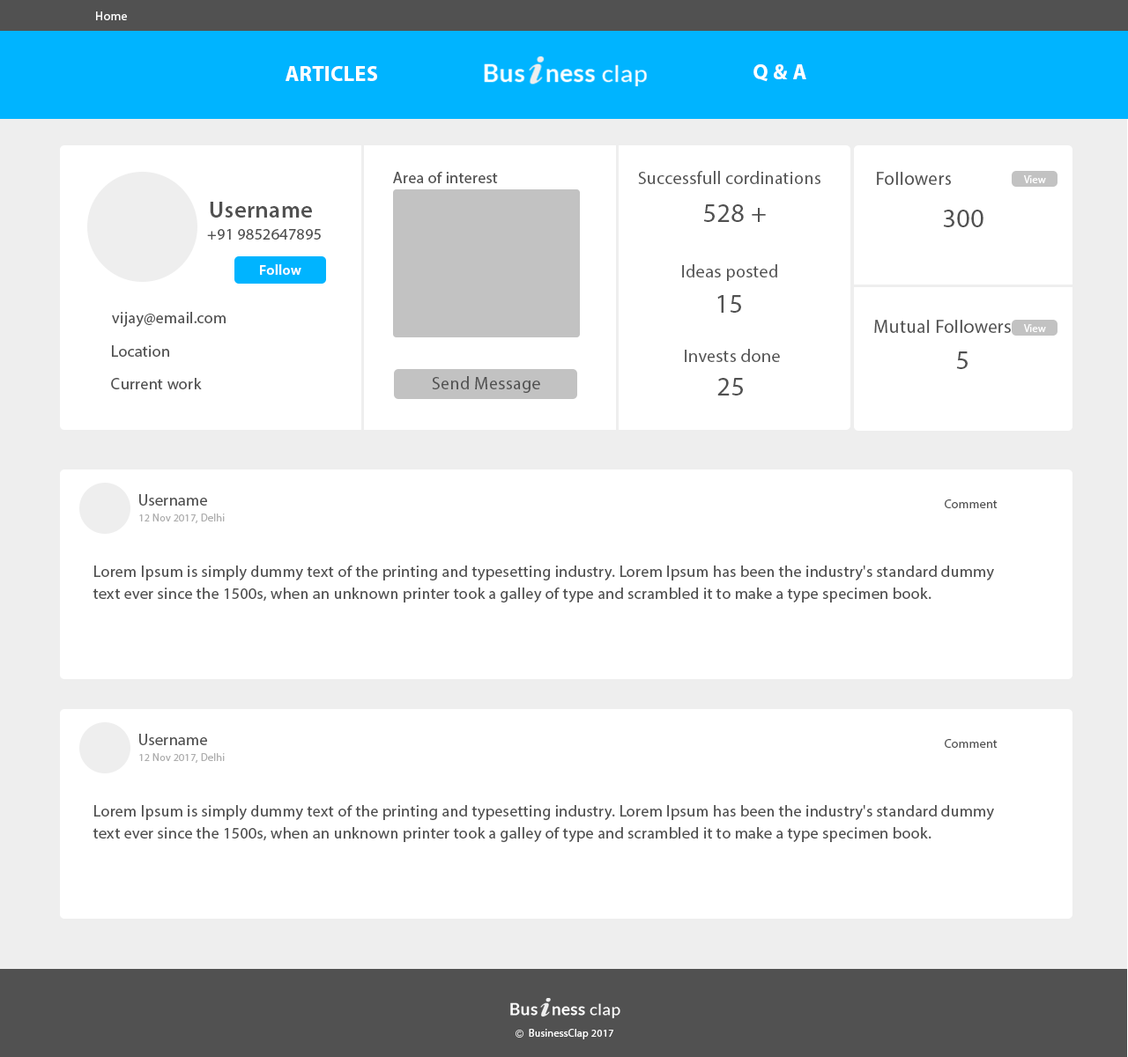
<style>
.page{position:relative;width:1128px;height:1057px;background:#ffffff}
.page>*{position:absolute;margin:0}
.t1{font:12.3px "MyriadPro-Regular";letter-spacing:0.02em;color:#ffffff}
.t2{font:21.1px "MyriadPro-Bold";letter-spacing:0.02em;color:#ffffff}
.t3{font:15.9px "MyriadPro-Regular";letter-spacing:0.02em;color:#515151}
.t4{font:17.6px "MyriadPro-Regular";letter-spacing:0.02em;color:#515151}
.t5{font:18.5px "MyriadPro-Regular";letter-spacing:0.02em;color:#515151}
.t6{font:10.6px "MyriadPro-Regular";letter-spacing:0.02em;color:#ffffff}
.t7{font:22.9px "MyriadPro-Semibold";letter-spacing:0.02em;color:#515151}
.t8{font:26.4px "MyriadPro-Regular";letter-spacing:0.02em;color:#515151}
.t9{font:14.1px "MyriadPro-Semibold";letter-spacing:0.02em;color:#ffffff}
.t10{font:12.3px "MyriadPro-Regular";letter-spacing:0.02em;color:#515151}
.t11{font:10.6px "MyriadPro-Regular";letter-spacing:0.02em;color:#aeaeae}
.t12{font:15.9px/21.9px "MyriadPro-Regular";letter-spacing:0.02em;color:#515151}
</style>
<div class="page">
<p class="t1" style="left:96px;top:11px;width:31px;height:9px">Home</p>
<p class="t2" style="left:753px;top:64px;width:53px;height:18px">Q &amp; A</p>
<p class="t2" style="left:285px;top:66px;width:92px;height:15px">ARTICLES</p>
<p class="t3" style="left:393px;top:172px;width:105px;height:11px">Area of interest</p>
<p class="t4" style="left:638px;top:171px;width:182px;height:13px">Successfull cordinations</p>
<p class="t5" style="left:877px;top:172px;width:74px;height:13px">Followers</p>
<p class="t6" style="left:1024px;top:175px;width:22px;height:8px">View</p>
<p class="t7" style="left:210px;top:202px;width:102px;height:16px">Username</p>
<p class="t8" style="left:703px;top:204px;width:63px;height:18px">528 +</p>
<p class="t8" style="left:943px;top:210px;width:40px;height:17px">300</p>
<p class="t3" style="left:207px;top:229px;width:114px;height:11px">+91 9852647895</p>
<p class="t9" style="left:260px;top:264px;width:41px;height:11px">Follow</p>
<p class="t4" style="left:682px;top:264px;width:95px;height:17px">Ideas posted</p>
<p class="t8" style="left:717px;top:295px;width:24px;height:18px">15</p>
<p class="t3" style="left:112px;top:312px;width:114px;height:15px">vijay@email.com</p>
<p class="t5" style="left:874px;top:320px;width:137px;height:13px">Mutual Followers</p>
<p class="t6" style="left:1024px;top:324px;width:22px;height:8px">View</p>
<p class="t3" style="left:112px;top:345px;width:57px;height:12px">Location</p>
<p class="t4" style="left:685px;top:349px;width:95px;height:13px">Invests done</p>
<p class="t8" style="left:956px;top:352px;width:11px;height:17px">5</p>
<p class="t3" style="left:111px;top:378px;width:91px;height:11px">Current work</p>
<p class="t4" style="left:432px;top:376px;width:108px;height:17px">Send Message</p>
<p class="t8" style="left:717px;top:378px;width:26px;height:18px">25</p>
<p class="t3" style="left:139px;top:494px;width:68px;height:12px">Username</p>
<p class="t10" style="left:945px;top:500px;width:52px;height:8px">Comment</p>
<p class="t11" style="left:139px;top:514px;width:86px;height:9px">12 Nov 2017, Delhi</p>
<p class="t12" style="left:93px;top:566px;width:901px;height:37px">Lorem Ipsum is simply dummy text of the printing and typesetting industry. Lorem Ipsum has been the industry's standard dummy text ever since the 1500s, when an unknown printer took a galley of type and scrambled it to make a type specimen book.</p>
<p class="t3" style="left:139px;top:734px;width:68px;height:11px">Username</p>
<p class="t10" style="left:945px;top:739px;width:52px;height:9px">Comment</p>
<p class="t11" style="left:139px;top:753px;width:86px;height:10px">12 Nov 2017, Delhi</p>
<p class="t12" style="left:93px;top:805px;width:901px;height:37px">Lorem Ipsum is simply dummy text of the printing and typesetting industry. Lorem Ipsum has been the industry's standard dummy text ever since the 1500s, when an unknown printer took a galley of type and scrambled it to make a type specimen book.</p>
<p class="t6" style="left:529px;top:1029px;width:84px;height:11px">BusinessClap 2017</p>
</div>
